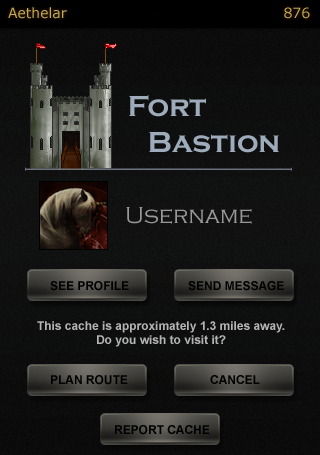
<style>
.page{position:relative;width:320px;height:455px}
.page>*{position:absolute;margin:0}
.t1{font:29.9px "CopperplateGothic-Bold";color:#9eabbb}
.t2{font:23.9px "CopperplateGothic-Light";color:#989898}
.t3{font:12px "Arial-BoldMT";color:#000000}
.t4{font:12px "Arial-BoldMT";color:#b4b4b4}
</style>
<div class="page">
<p class="t1" style="left:129px;top:95px;width:150px;height:58px;text-align:right">Fort <br>Bastion</p>
<p class="t2" style="left:126px;top:207px;width:126px;height:17px">Username</p>
<p class="t3" style="left:50px;top:281px;width:79px;height:10px">SEE PROFILE</p>
<p class="t3" style="left:188px;top:281px;width:96px;height:10px">SEND MESSAGE</p>
<p class="t4" style="left:37px;top:321px;width:248px;height:26px;text-align:center">This cache is approximately 1.3 miles away.<br>Do you wish to visit it?</p>
<p class="t3" style="left:51px;top:375px;width:77px;height:10px">PLAN ROUTE</p>
<p class="t3" style="left:210px;top:375px;width:50px;height:9px">CANCEL</p>
<p class="t3" style="left:115px;top:425px;width:95px;height:10px">REPORT CACHE</p>
</div>
